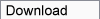
<style>
.page{position:relative;width:100px;height:19px;background:#fafafa}
.page>*{position:absolute;margin:0}
.t1{font:14px "ArialMT";color:#000000}
</style>
<div class="page">
<p class="t1" style="left:6px;top:5px;width:61px;height:11px">Download</p>
</div>
